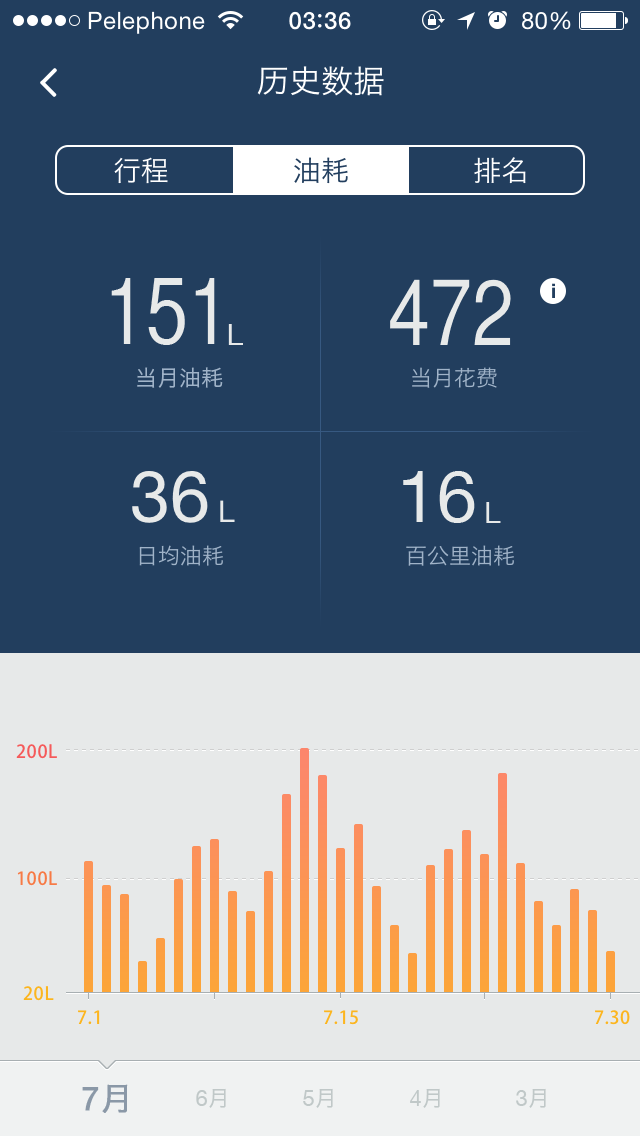
<style>
.page{position:relative;width:640px;height:1136px;background:#223e5e}
.page>*{position:absolute;margin:0}
.t1{font:24px "HelveticaNeue";letter-spacing:0.02em;color:#ffffff}
.t2{font:24px "HelveticaNeue-Medium";letter-spacing:0.03em;color:#ffffff}
.t3{font:32px "HiraginoSansGB-W3";color:#ffffff}
.t4{font:28px "HiraginoSansGB-W3";color:#ffffff}
.t5{font:28px "HiraginoSansGB-W3";color:#223e5e}
.t6{font:92.1px "HelveticaCYPlain";color:#e7e9e9}
.t7{font:92px "HelveticaCYPlain";color:#e7e9e9}
.t8{font:20px "HelveticaNeue-Bold";color:#223e5e}
.t9{font:30px "HelveticaNeue";color:#e7e9e9}
.t10{font:22px "HiraginoSansGB-W3";color:#a0b3c8}
.t11{font:72px "HelveticaNeue";color:#e7e9e9}
.t12{font:18px "AdobeHeitiStd-Regular";letter-spacing:0.025em;color:#f55a5a}
.t13{font:18px "AdobeHeitiStd-Regular";letter-spacing:0.025em;color:#f87b44}
.t14{font:18px "AdobeHeitiStd-Regular";letter-spacing:0.025em;color:#fcb51e}
.t15{font:32px "HelveticaNeue";color:#8a98a7;font-weight:bold}
.t16{font:32px "HiraginoSansGB-W3";color:#8a98a7;font-weight:bold}
.t17{font:22px "HelveticaNeue";color:#c0c8c8}
.t18{font:22px "HiraginoSansGB-W3";color:#c0c8c8}
</style>
<div class="page">
<p class="t1" style="left:88px;top:11px;width:117px;height:23px">Pelephone</p>
<p class="t2" style="left:289px;top:11px;width:62px;height:19px">03 36</p>
<p class="t1" style="left:522px;top:11px;width:49px;height:19px">80%</p>
<p class="t3" style="left:257px;top:66px;width:127px;height:30px">历史数据</p>
<p class="t4" style="left:114px;top:157px;width:54px;height:27px">行程</p>
<p class="t5" style="left:294px;top:157px;width:54px;height:27px">油耗</p>
<p class="t4" style="left:474px;top:157px;width:52px;height:27px">排名</p>
<p class="t6" style="left:111px;top:278px;width:104px;height:67px">151</p>
<p class="t7" style="left:390px;top:279px;width:121px;height:66px">472</p>
<p class="t8" style="left:552px;top:283px;width:3px;height:15px">i</p>
<p class="t9" style="left:228px;top:324px;width:15px;height:21px">L</p>
<p class="t10" style="left:137px;top:367px;width:86px;height:21px">当月油耗</p>
<p class="t10" style="left:412px;top:367px;width:85px;height:21px">当月花费</p>
<p class="t11" style="left:132px;top:471px;width:76px;height:52px">36</p>
<p class="t11" style="left:403px;top:471px;width:72px;height:52px">16</p>
<p class="t9" style="left:220px;top:500px;width:15px;height:22px">L</p>
<p class="t9" style="left:486px;top:502px;width:15px;height:21px">L</p>
<p class="t10" style="left:139px;top:545px;width:84px;height:21px">日均油耗</p>
<p class="t10" style="left:406px;top:545px;width:108px;height:21px">百公里油耗</p>
<p class="t12" style="left:16px;top:744px;width:41px;height:15px">200L</p>
<p class="t13" style="left:17px;top:871px;width:40px;height:15px">100L</p>
<p class="t14" style="left:23px;top:986px;width:31px;height:15px">20L</p>
<p class="t14" style="left:78px;top:1010px;width:22px;height:15px">7.1</p>
<p class="t14" style="left:324px;top:1010px;width:34px;height:15px">7.15</p>
<p class="t14" style="left:595px;top:1010px;width:35px;height:15px">7.30</p>
<p class="t15" style="left:82px;top:1084px;width:46px;height:29px">7<span class="t16">月</span></p>
<p class="t17" style="left:196px;top:1088px;width:30px;height:20px">6<span class="t18">月</span></p>
<p class="t17" style="left:303px;top:1088px;width:30px;height:20px">5<span class="t18">月</span></p>
<p class="t17" style="left:410px;top:1088px;width:30px;height:20px">4<span class="t18">月</span></p>
<p class="t17" style="left:516px;top:1088px;width:30px;height:20px">3<span class="t18">月</span></p>
</div>
